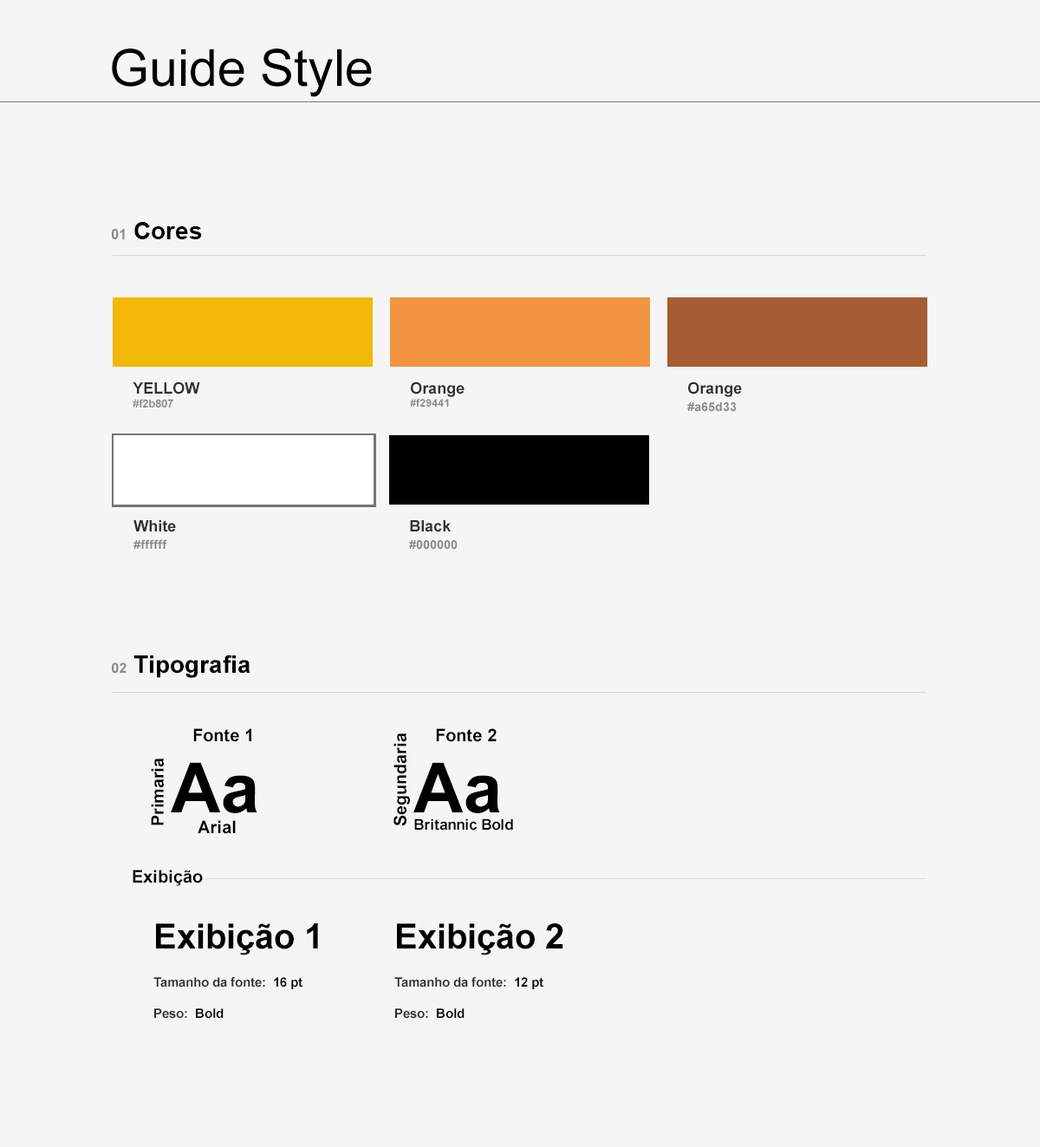
<style>
.page{position:relative;width:1040px;height:1147px;background:#f5f5f5}
.page>*{position:absolute;margin:0}
.t1{font:51.1px "ArialMT";color:#000000}
.t2{font:24.3px "Arial-BoldMT";color:#000000}
.t3{font:13.9px "Arial-BoldMT";color:#888888}
.t4{font:11.3px "Arial-BoldMT";color:#888888}
.t5{font:15.6px "Arial-BoldMT";color:#313131}
.t6{font:10.4px "Arial-BoldMT";color:#888888}
.t7{font:12.1px/17.3px "Arial-BoldMT";color:#888888}
.t8{font:17.3px "Arial-BoldMT";color:#000000}
.t9{font:69.3px "Arial-BoldMT";color:#000000}
.t10{font:14.7px "Arial-BoldMT";color:#000000}
.t11{font:34.7px "Arial-BoldMT";color:#000000}
.t12{font:13px "Arial-BoldMT";color:#2d2d2d}
.t13{font:13px "Arial-BoldMT";color:#000000}
</style>
<div class="page">
<p class="t1" style="left:112px;top:49px;width:260px;height:48px">Guide Style</p>
<p class="t2" style="left:111px;top:222px;width:91px;height:17px"><span class="t3">01 </span>Cores</p>
<p class="t4" style="left:133px;top:381px;width:67px;height:26px"><span class="t5">YELLOW<br></span>#f2b807</p>
<p class="t6" style="left:410px;top:381px;width:55px;height:25px"><span class="t5">Orange<br></span>#f29441</p>
<p class="t7" style="left:687px;top:381px;width:55px;height:31px"><span class="t5">Orange<br></span>#a65d33</p>
<p class="t7" style="left:133px;top:520px;width:43px;height:29px"><span class="t5">White<br></span>#ffffff</p>
<p class="t7" style="left:409px;top:520px;width:49px;height:29px"><span class="t5">Black<br></span>#000000</p>
<p class="t2" style="left:112px;top:654px;width:138px;height:24px"><span class="t3">02 </span>Tipografia</p>
<p class="t8" style="left:193px;top:728px;width:58px;height:14px">Fonte 1</p>
<p class="t8" style="left:393px;top:732px;width:17px;height:94px;rotate:-90deg">Segundaria</p>
<p class="t8" style="left:436px;top:728px;width:61px;height:14px">Fonte 2</p>
<p class="t8" style="left:151px;top:757px;width:13px;height:68px;rotate:-90deg">Primaria</p>
<p class="t8" style="left:171px;top:762px;width:86px;height:72px"><span class="t9">Aa<br>  </span>    Arial</p>
<p class="t10" style="left:413px;top:762px;width:100px;height:68px"><span class="t9">Aa<br></span>Britannic Bold</p>
<p class="t8" style="left:133px;top:869px;width:70px;height:17px">Exibição</p>
<p class="t11" style="left:156px;top:923px;width:162px;height:32px">Exibição 1</p>
<p class="t11" style="left:397px;top:923px;width:166px;height:32px">Exibição 2</p>
<p class="t12" style="left:153px;top:977px;width:149px;height:41px">Tamanho da fonte:<span class="t13">  16 pt<br></span><br>Peso:<span class="t13">  Bold</span></p>
<p class="t12" style="left:394px;top:977px;width:149px;height:41px">Tamanho da fonte:<span class="t13">  12 pt<br></span><br>Peso:<span class="t13">  Bold</span></p>
</div>
